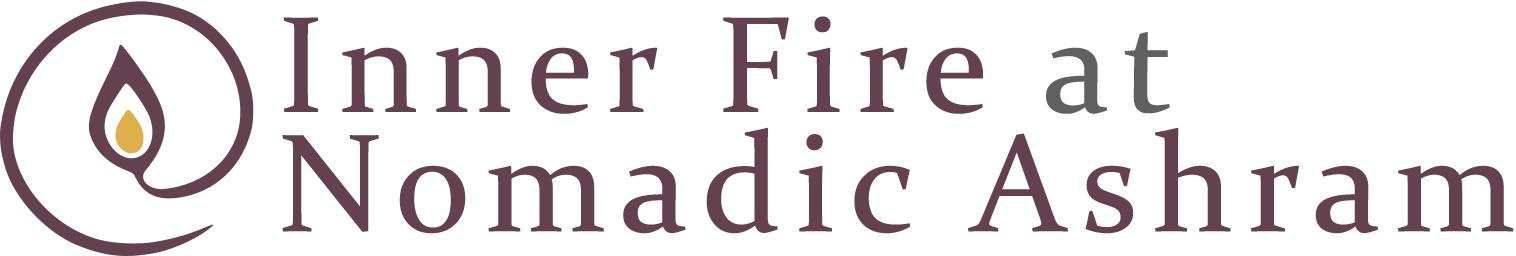
<style>
.page{position:relative;width:1516px;height:256px;background:#ffffff}
.page>*{position:absolute;margin:0}
.t1{font:137.5px "Constantia";letter-spacing:0.075em;color:#64414e;font-weight:bold}
.t2{font:137.5px "Constantia";letter-spacing:0.075em;color:#606060;font-weight:bold}
.t3{font:140px "Constantia";letter-spacing:0.075em;color:#64414e;font-weight:bold}
</style>
<div class="page">
<p class="t1" style="left:284px;top:16px;width:886px;height:98px">Inner Fire <span class="t2">at</span></p>
<p class="t3" style="left:282px;top:127px;width:1232px;height:107px">Nomadic Ashram</p>
</div>
